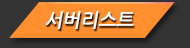
<style>
.page{position:relative;width:190px;height:48px;background:#ff8f2f}
.page>*{position:absolute;margin:0}
.t1{font:19px "NanumGothicBold";color:#ffffff;font-style:italic}
</style>
<div class="page">
<p class="t1" style="left:45px;top:11px;width:89px;height:18px">서버리스트</p>
</div>
